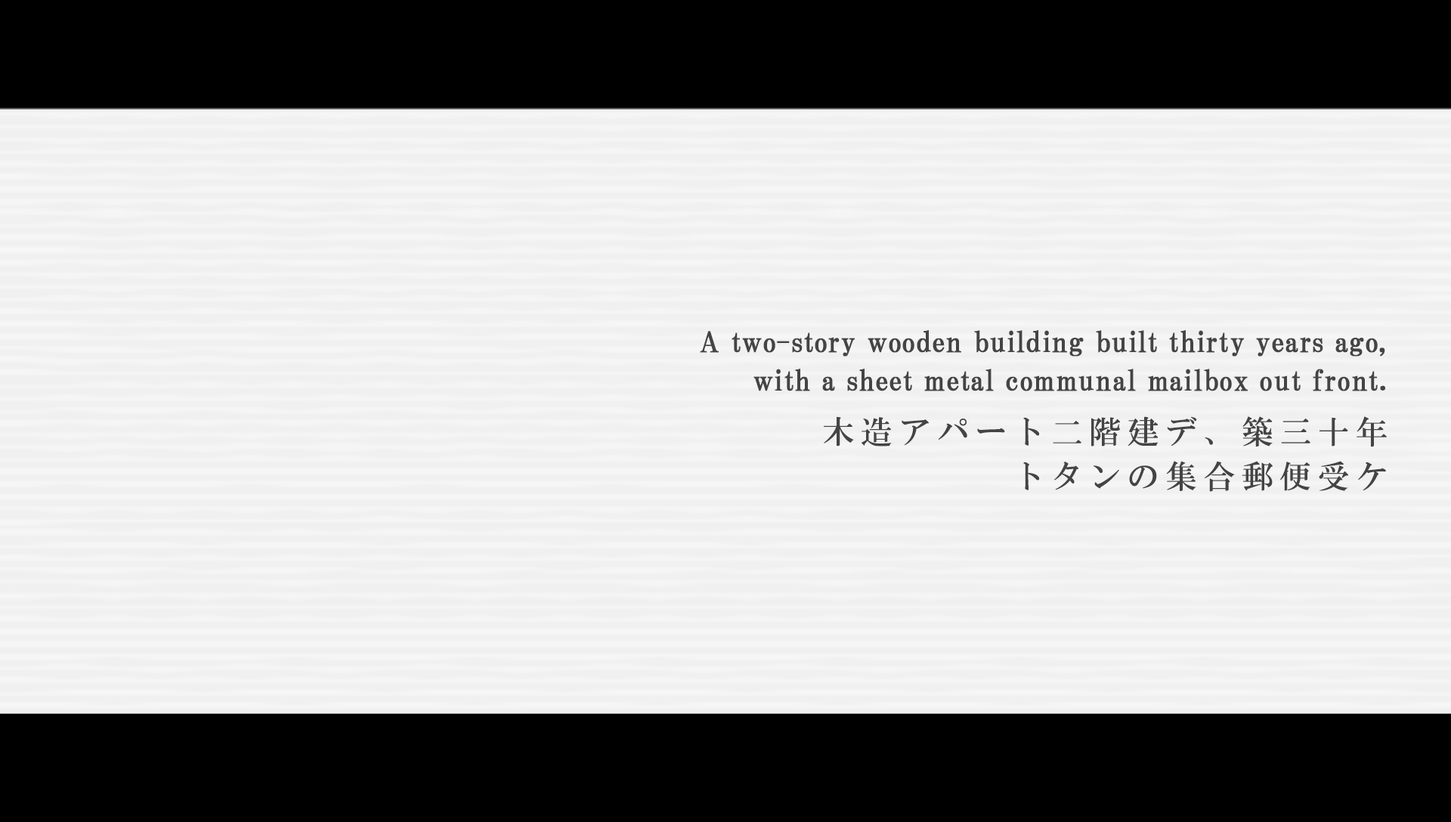
<style>
.page{position:relative;width:1451px;height:822px;background:#f0f0f0}
.page>*{position:absolute;margin:0}
.t1{font:28.2px/38.3px "HGPMinchoB";letter-spacing:0.01em;color:#444444;font-weight:bold}
.t2{font:31.7px/44.6px "HGMinchoB";letter-spacing:0.2em;color:#444444}
</style>
<div class="page">
<p class="t1" style="left:700px;top:330px;width:685px;height:61px;text-align:right">A two-story wooden building built thirty years ago,<br>with a sheet metal communal mailbox out front.</p>
<p class="t2" style="left:824px;top:416px;width:562px;height:76px;text-align:right">木造アパート二階建デ、築三十年<br>トタンの集合郵便受ケ</p>
</div>
